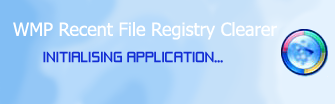
<style>
.page{position:relative;width:335px;height:104px}
.page>*{position:absolute;margin:0}
.t1{font:18px "Tahoma";color:#ffffff}
.t2{font:14px "ZeroThrees";color:#132ed4}
</style>
<div class="page">
<p class="t1" style="left:13px;top:22px;width:264px;height:18px">WMP Recent File Registry Clearer</p>
<p class="t2" style="left:43px;top:51px;width:180px;height:12px">INITIALISING APPLICATION...</p>
</div>
